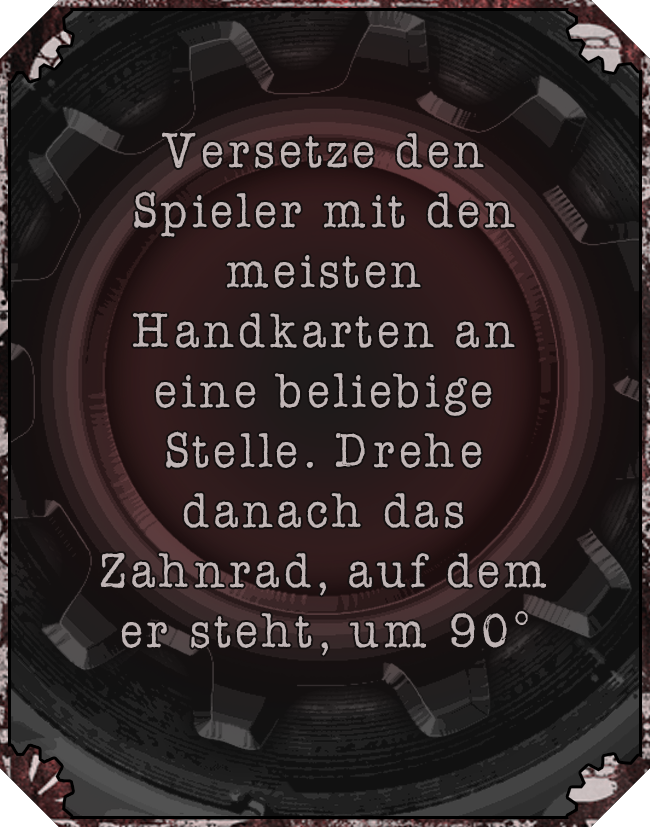
<style>
.page{position:relative;width:650px;height:827px}
.page>*{position:absolute;margin:0}
.t1{font:50px "AmerTypewriterITCbyBT-Medium";letter-spacing:0.02em;color:#c0b5b5}
</style>
<div class="page">
<p class="t1" style="left:100px;top:132px;width:446px;height:524px;text-align:center">Versetze den Spieler mit den meisten Handkarten an eine beliebige Stelle. Drehe danach das Zahnrad, auf dem er steht, um 90°</p>
</div>
